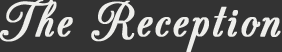
<style>
.page{position:relative;width:282px;height:52px;background:#333333}
.page>*{position:absolute;margin:0}
.t1{font:58.7px "CACChampagne";letter-spacing:0.025em;color:#eeeeeb;font-weight:bold}
</style>
<div class="page">
<p class="t1" style="left:0px;top:0px;width:281px;height:52px">The Reception</p>
</div>
